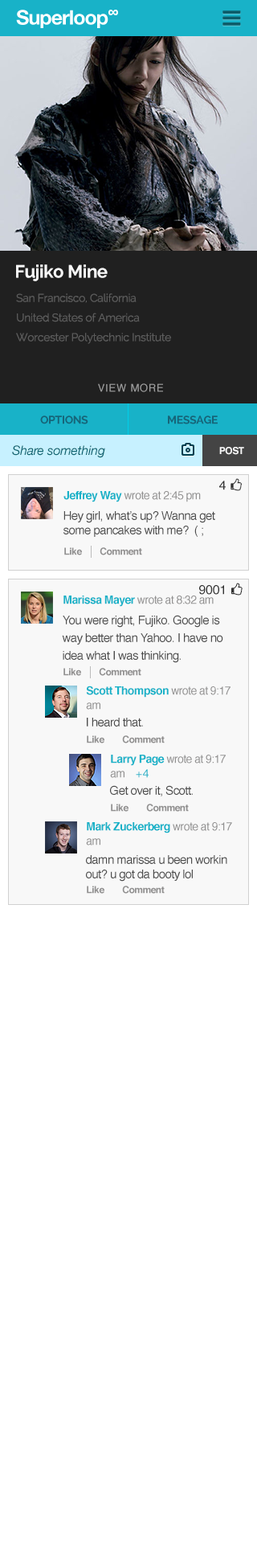
<style>
.page{position:relative;width:257px;height:1568px;background:#ffffff}
.page>*{position:absolute;margin:0}
.t1{font:17.9px "Raleway-Bold";letter-spacing:-0.02em;color:#f8f8f8}
.t2{font:11.2px/19.6px "Raleway-Regular";letter-spacing:-0.02em;color:#5b5b5b}
.t3{font:10.4px "Helvetica";letter-spacing:0.06em;color:#9d9d9d}
.t4{font:11.3px "Raleway-Bold";letter-spacing:-0.02em;color:#166579}
.t5{font:12.9px "HelveticaNeue-Italic";letter-spacing:-0.02em;color:#106773}
.t6{font:9.6px "Helvetica-Bold";letter-spacing:-0.04em;color:#f8f8f8}
.t7{font:11.3px "Helvetica";letter-spacing:-0.04em;color:#919090}
.t8{font:11.3px "Helvetica-Bold";letter-spacing:-0.04em;color:#18b2c8}
.t9{font:12.1px/14.5px "Helvetica";letter-spacing:-0.04em;color:#4d4d4d}
.t10{font:9.6px "Helvetica-Bold";letter-spacing:-0.04em;color:#919090}
.t11{font:12.1px/17.7px "Helvetica";letter-spacing:-0.04em;color:#4d4d4d}
.t12{font:11.3px/14.5px "Helvetica";letter-spacing:-0.04em;color:#919090}
.t13{font:11.3px/14.5px "Helvetica-Bold";letter-spacing:-0.04em;color:#18b2c8}
.t14{font:12.1px "Helvetica";letter-spacing:-0.04em;color:#4d4d4d}
.t15{font:11.3px/14.5px "Helvetica";letter-spacing:0.04em;color:#18b2c8}
</style>
<div class="page">
<p class="t1" style="left:16px;top:264px;width:92px;height:17px">Fujiko Mine</p>
<p class="t2" style="left:16px;top:293px;width:155px;height:51px">San Francisco, California<br>United States of America<br>Worcester Polytechnic Institute</p>
<p class="t3" style="left:98px;top:383px;width:65px;height:9px">VIEW MORE</p>
<p class="t4" style="left:40px;top:416px;width:48px;height:8px">OPTIONS</p>
<p class="t4" style="left:168px;top:416px;width:50px;height:8px">MESSAGE</p>
<p class="t5" style="left:12px;top:445px;width:93px;height:13px">Share something</p>
<p class="t6" style="left:219px;top:447px;width:25px;height:8px">POST</p>
<p class="t7" style="left:63px;top:491px;width:138px;height:11px"><span class="t8">Jeffrey Way </span>wrote at 2:45 pm</p>
<p class="t9" style="left:63px;top:511px;width:152px;height:26px">Hey girl, what’s up? Wanna get <br>some pancakes with me?  ( ;</p>
<p class="t10" style="left:64px;top:547px;width:78px;height:8px">Like        Comment</p>
<p class="t7" style="left:63px;top:596px;width:151px;height:11px"><span class="t8">Marissa Mayer </span>wrote at 8:32 am</p>
<p class="t11" style="left:62px;top:615px;width:161px;height:48px">You were right, Fujiko. Google is <br>way better than Yahoo. I have no <br>idea what I was thinking.</p>
<p class="t10" style="left:63px;top:668px;width:78px;height:8px">Like        Comment</p>
<p class="t12" style="left:86px;top:686px;width:145px;height:24px"><span class="t13">Scott Thompson </span>wrote at 9:17 <br>am</p>
<p class="t14" style="left:87px;top:718px;width:56px;height:9px">I heard that.</p>
<p class="t10" style="left:87px;top:735px;width:78px;height:8px">Like        Comment</p>
<p class="t12" style="left:110px;top:755px;width:116px;height:23px"><span class="t13">Larry Page </span>wrote at 9:17 <br>am    <span class="t15">+4</span></p>
<p class="t14" style="left:110px;top:785px;width:83px;height:11px">Get over it, Scott.</p>
<p class="t10" style="left:111px;top:804px;width:78px;height:8px">Like        Comment</p>
<p class="t12" style="left:86px;top:822px;width:146px;height:23px"><span class="t13">Mark Zuckerberg </span>wrote at 9:17<br>am</p>
<p class="t9" style="left:86px;top:855px;width:141px;height:27px">damn marissa u been workin <br>out? u got da booty lol</p>
<p class="t10" style="left:87px;top:886px;width:78px;height:8px">Like        Comment</p>
</div>
